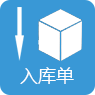
<style>
.page{position:relative;width:95px;height:95px;background:#3998d6}
.page>*{position:absolute;margin:0}
.t1{font:18px "MicrosoftYaHei";color:#ffffff}
</style>
<div class="page">
<p class="t1" style="left:20px;top:67px;width:54px;height:17px">入库单</p>
</div>
